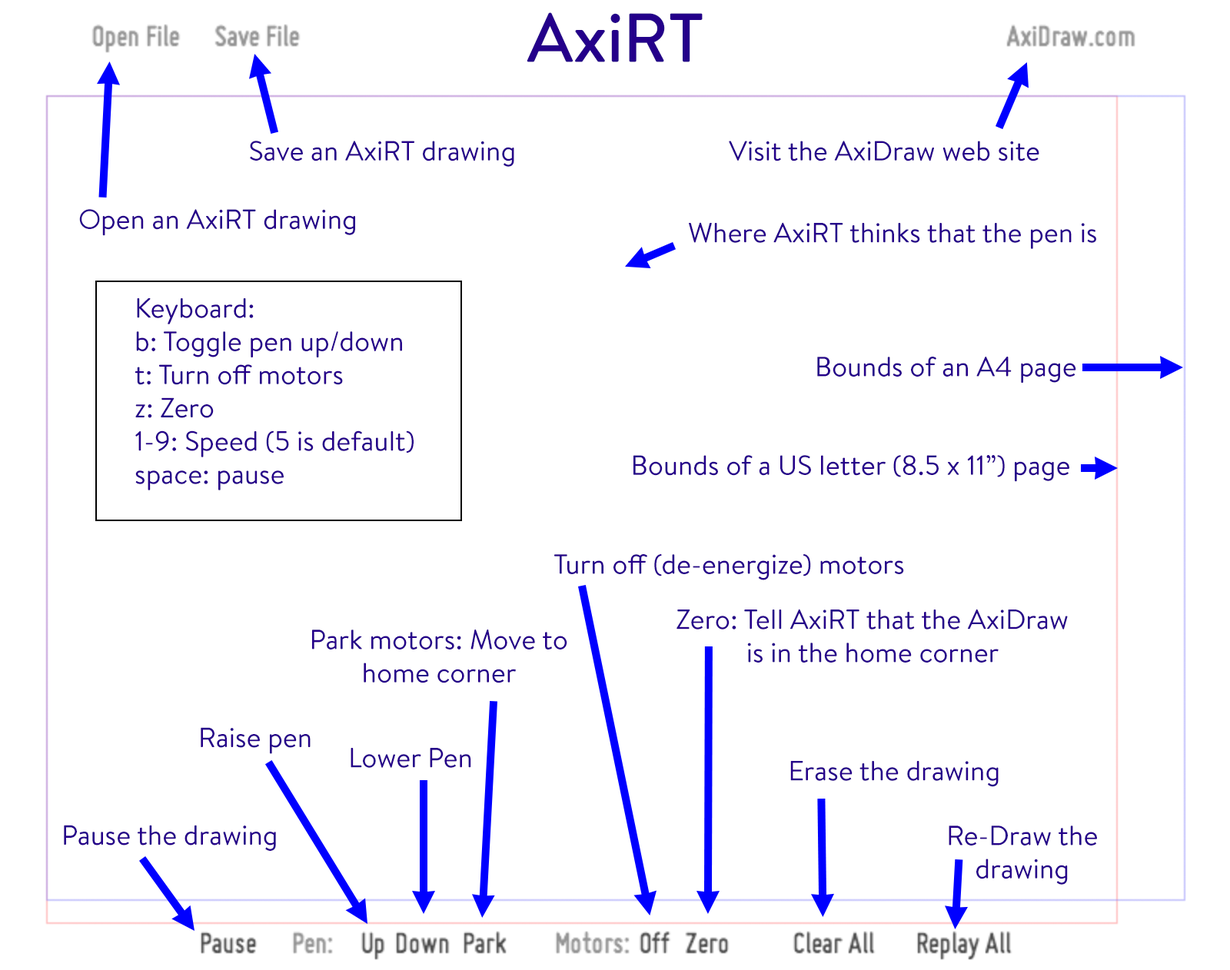
<style>
.page{position:relative;width:1230px;height:970px;background:#ffffff}
.page>*{position:absolute;margin:0}
.t1{font:69.2px "BrandonText-Medium";color:#24008a}
.t2{font:27.7px "BrandonText-Regular";color:#25008a}
</style>
<div class="page">
<p class="t1" style="left:526px;top:12px;width:176px;height:50px">AxiRT</p>
<p class="t2" style="left:250px;top:141px;width:264px;height:26px">Save an AxiRT drawing</p>
<p class="t2" style="left:729px;top:141px;width:310px;height:20px">Visit the AxiDraw web site</p>
<p class="t2" style="left:79px;top:209px;width:276px;height:27px">Open an AxiRT drawing</p>
<p class="t2" style="left:689px;top:222px;width:407px;height:27px">Where AxiRT thinks that the pen is</p>
<p class="t2" style="left:134px;top:298px;width:279px;height:192px">Keyboard:<br>b: Toggle pen up/down<br>t: Turn off motors<br>z: Zero<br>1-9: Speed (5 is default)<br>space: pause</p>
<p class="t2" style="left:817px;top:357px;width:259px;height:26px">Bounds of an A4 page</p>
<p class="t2" style="left:633px;top:455px;width:436px;height:27px">Bounds of a US letter (8.5 x 11”) page</p>
<p class="t2" style="left:554px;top:554px;width:350px;height:26px">Turn off (de-energize) motors</p>
<p class="t2" style="left:676px;top:609px;width:391px;height:53px;text-align:center">Zero: Tell AxiRT that the AxiDraw<br>is in the home corner</p>
<p class="t2" style="left:312px;top:629px;width:255px;height:54px;text-align:center">Park motors: Move to<br>home corner</p>
<p class="t2" style="left:201px;top:727px;width:109px;height:27px">Raise pen</p>
<p class="t2" style="left:350px;top:748px;width:121px;height:20px">Lower Pen</p>
<p class="t2" style="left:790px;top:761px;width:208px;height:26px">Erase the drawing</p>
<p class="t2" style="left:64px;top:825px;width:212px;height:26px">Pause the drawing</p>
<p class="t2" style="left:948px;top:825px;width:149px;height:60px;text-align:center">Re-Draw the<br>drawing</p>
</div>
